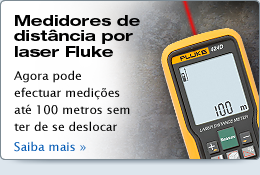
<style>
.page{position:relative;width:260px;height:175px}
.page>*{position:absolute;margin:0}
.t1{font:15px/15.5px "HelveticaNeueLTStd-BdEx";color:#000000}
.t2{font:12px/12px "LucidaSans";color:#000000}
.t3{font:12px/14.4px "LucidaSans";color:#0058b3}
</style>
<div class="page">
<p class="t1" style="left:14px;top:15px;width:126px;height:42px">Medidores de distância por laser Fluke</p>
<p class="t2" style="left:14px;top:70px;width:116px;height:82px">Agora pode <br>efectuar medições <br>até 100 metros sem <br>ter de se deslocar<br><span class="t3">Saiba mais »</span></p>
</div>
